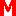
<style>
.page{position:relative;width:16px;height:16px;background:#ff0000}
.page>*{position:absolute;margin:0}
.t1{font:20.7px "Verdana-Bold";color:#ff0000}
</style>
<div class="page">
<p class="t1" style="left:0px;top:0px;width:16px;height:16px">M</p>
</div>
